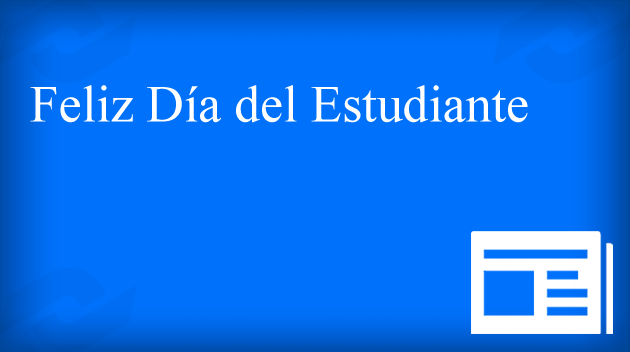
<style>
.page{position:relative;width:630px;height:352px;background:#0071fa}
.page>*{position:absolute;margin:0}
.t1{font:52px "TimesNewRomanPSMT";color:#ffffff}
</style>
<div class="page">
<p class="t1" style="left:30px;top:85px;width:498px;height:38px">Feliz Día del Estudiante</p>
</div>
